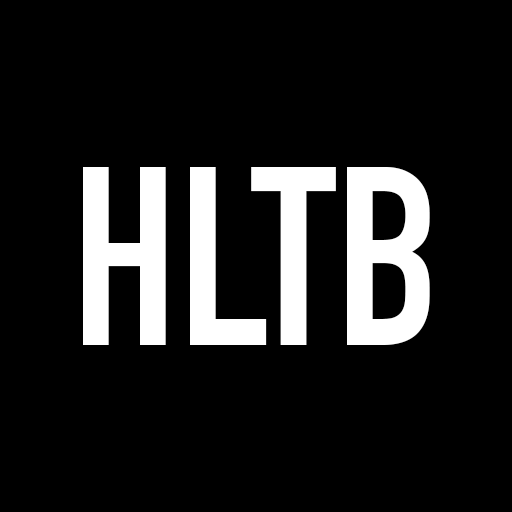
<style>
.page{position:relative;width:512px;height:512px;background:#000000}
.page>*{position:absolute;margin:0}
.t1{font:250px "DINCondensed-Bold";color:#ffffff}
</style>
<div class="page">
<p class="t1" style="left:83px;top:167px;width:347px;height:178px">HLTB</p>
</div>
